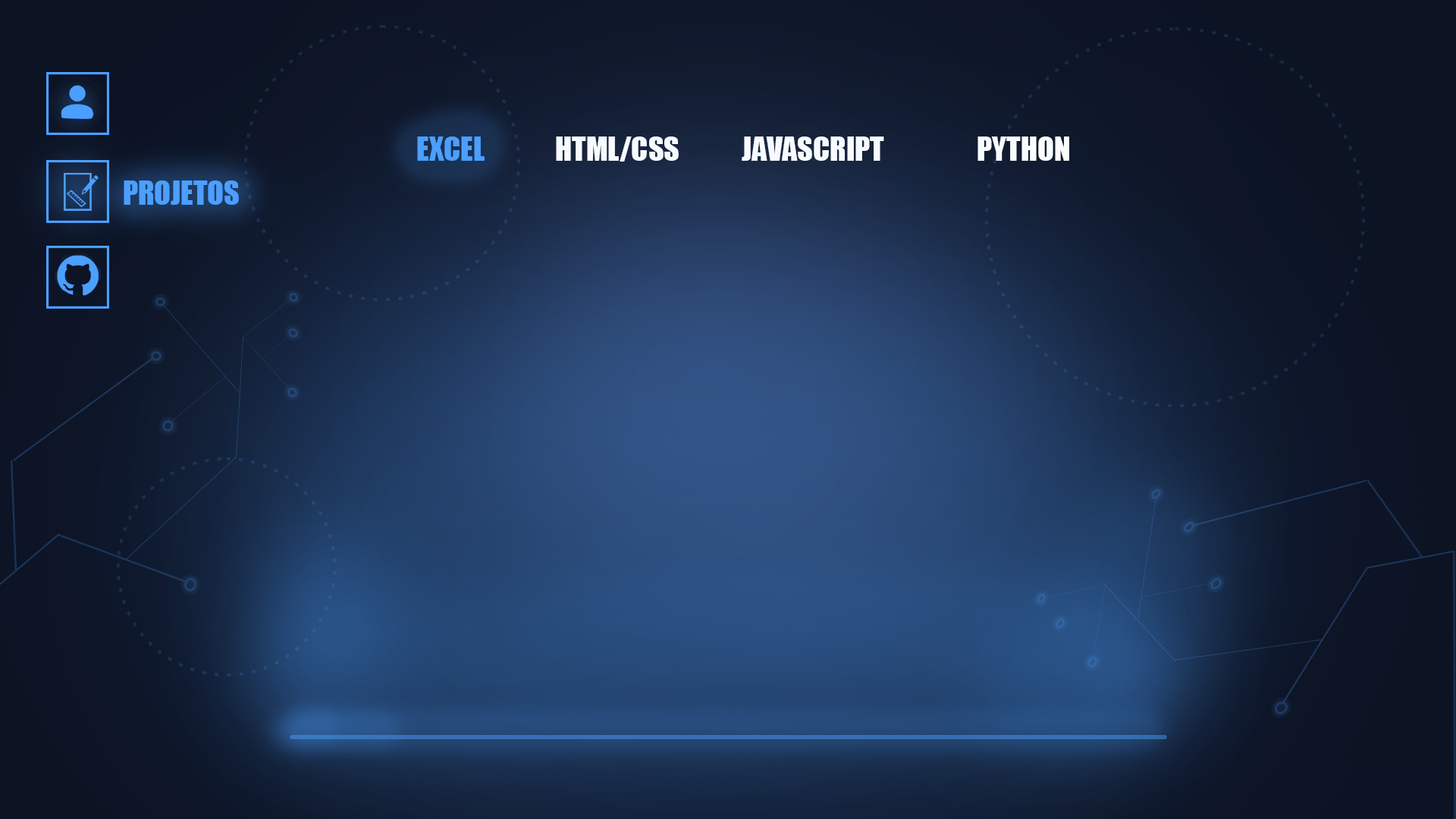
<style>
.page{position:relative;width:1456px;height:819px}
.page>*{position:absolute;margin:0}
.t1{font:30.3px "Impact";color:#4b9fff}
.t2{font:30.3px "Impact";color:#ffffff}
</style>
<div class="page">
<p class="t1" style="left:417px;top:136px;width:68px;height:25px">EXCEL</p>
<p class="t2" style="left:556px;top:136px;width:123px;height:26px">HTML/CSS</p>
<p class="t2" style="left:742px;top:136px;width:142px;height:25px">JAVASCRIPT</p>
<p class="t2" style="left:977px;top:136px;width:92px;height:25px">PYTHON</p>
<p class="t1" style="left:124px;top:180px;width:115px;height:25px">PROJETOS</p>
</div>
